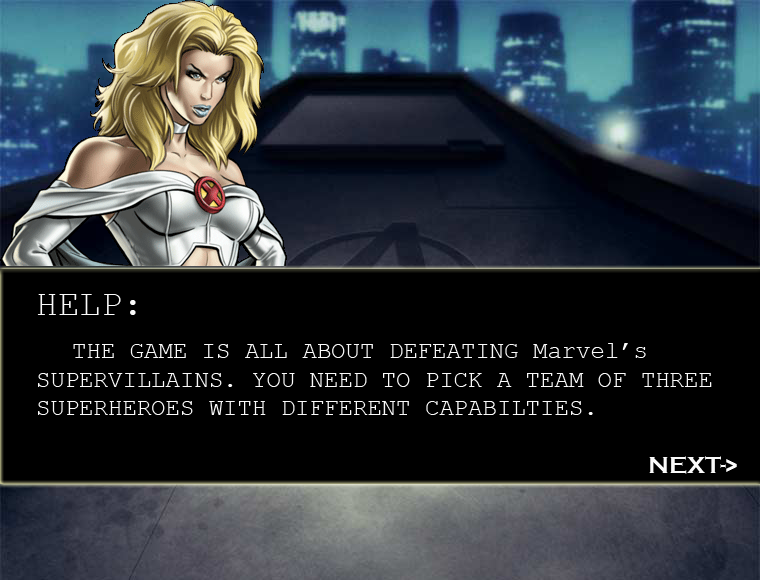
<style>
.page{position:relative;width:760px;height:580px;background:#000000}
.page>*{position:absolute;margin:0}
.t1{font:24px "CourierNewPSMT";color:#fafafa}
.t2{font:60px "Tahoma";color:#fafafa}
.t3{font:36px "CourierNewPSMT";color:#fafafa}
.t4{font:24px "CopperplateGothic-Bold";color:#fafafa}
</style>
<div class="page">
<p class="t1" style="left:37px;top:294px;width:700px;height:180px"><span class="t2"> </span><span class="t3">HELP:<br>  </span>THE GAME IS ALL ABOUT DEFEATING Marvel’s<br> SUPERVILLAINS. YOU NEED TO PICK A TEAM OF THREE   SUPERHEROES WITH DIFFERENT CAPABILTIES.<br>                 <br><span class="t4">                  NEXT-&gt;</span></p>
</div>
